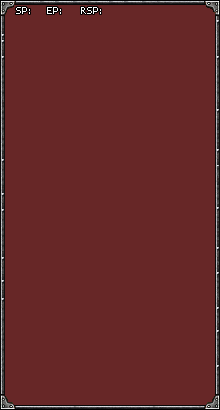
<style>
.page{position:relative;width:220px;height:410px;background:#672727}
.page>*{position:absolute;margin:0}
.t1{font:10px "Tahoma";color:#ffffff}
</style>
<div class="page">
<p class="t1" style="left:16px;top:7px;width:85px;height:7px">SP:     EP:      RSP:</p>
</div>
